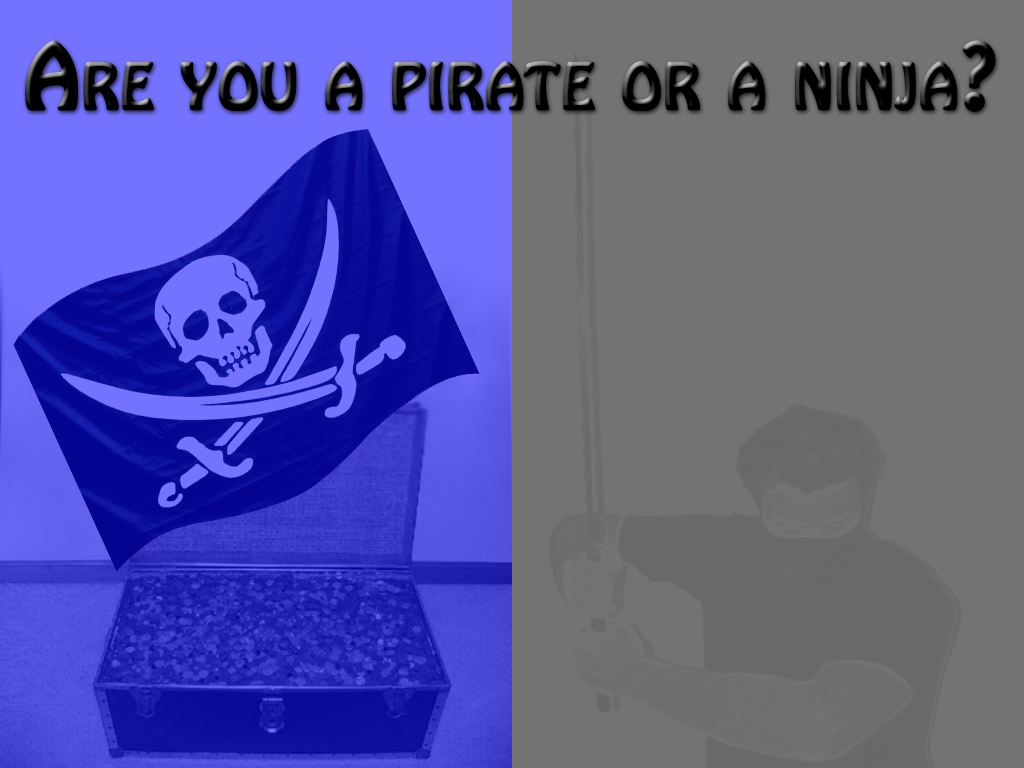
<style>
.page{position:relative;width:1024px;height:768px;background:#737373}
.page>*{position:absolute;margin:0}
.t1{font:80px "HoboStd";color:#000000;font-variant:small-caps;font-weight:bold}
</style>
<div class="page">
<p class="t1" style="left:25px;top:40px;width:971px;height:72px">Are you a pirate or a ninja?</p>
</div>
